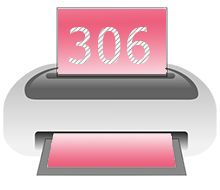
<style>
.page{position:relative;width:220px;height:190px;background:#ffffff}
.page>*{position:absolute;margin:0}
.t1{font:48px "Tahoma";letter-spacing:0.06em}
</style>
<div class="page">
<p class="t1" style="left:69px;top:27px;width:81px;height:37px">306</p>
</div>
